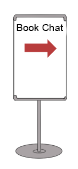
<style>
.page{position:relative;width:78px;height:169px;background:#ffffff}
.page>*{position:absolute;margin:0}
.t1{font:10px "ArialMT";color:#050505}
</style>
<div class="page">
<p class="t1" style="left:16px;top:24px;width:47px;height:7px">Book Chat</p>
</div>
